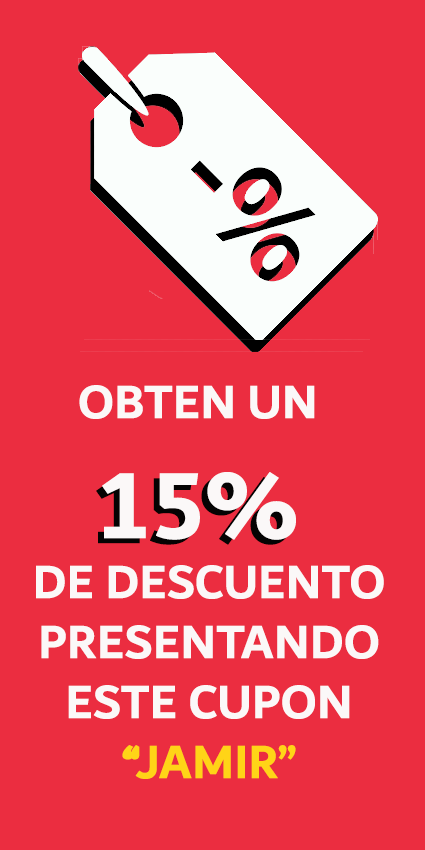
<style>
.page{position:relative;width:425px;height:850px;background:#eb2d40}
.page>*{position:absolute;margin:0}
.t1{font:50px "Dubai-Bold";color:#fbf8f8}
.t2{font:100px "Dubai-Bold";color:#fbf8f8}
.t3{font:50px "Dubai-Bold";color:#ffd417}
.t4{font:100px "Dubai-Bold"}
</style>
<div class="page">
<p class="t1" style="left:36px;top:385px;width:348px;height:394px;text-align:center">OBTEN UN<span class="t2"> <br>15% <br></span>DE DESCUENTO<br>PRESENTANDO<br>ESTE CUPON<br><span class="t3">“JAMIR”</span></p>
<p class="t4" style="left:96px;top:477px;width:194px;height:68px">15%</p>
</div>
